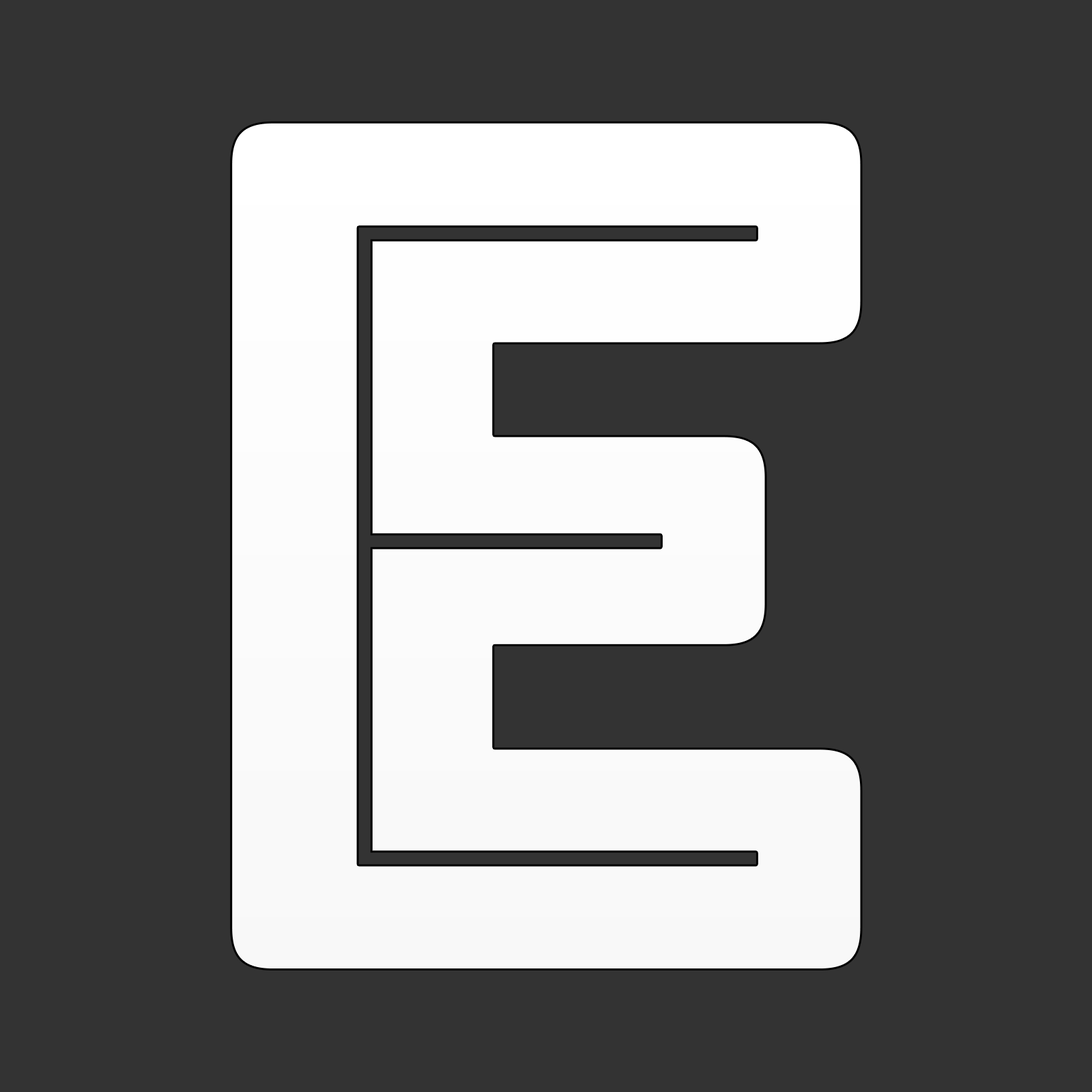
<style>
.page{position:relative;width:1092px;height:1092px;background:#333333}
.page>*{position:absolute;margin:0}
.t1{font:1179.3px "BungeeInline-Regular";color:#ffffff}
</style>
<div class="page">
<p class="t1" style="left:230px;top:121px;width:633px;height:850px">E</p>
</div>
